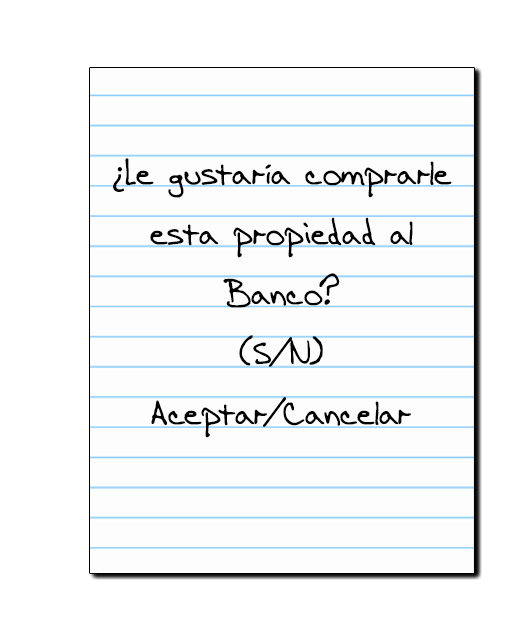
<style>
.page{position:relative;width:512px;height:640px;background:#ffffff}
.page>*{position:absolute;margin:0}
.t1{font:36px/60px "AEnigmaScrawl4BRK";color:#000000}
.t2{font:36px/60px "MyriadPro-Regular";color:#000000}
</style>
<div class="page">
<p class="t1" style="left:113px;top:158px;width:339px;height:280px;text-align:center"><span class="t2">¿</span>Le gustaría comprarle<br>esta propiedad al<br>Banco?<br>(S/N)<br>Aceptar/Cancelar</p>
</div>
